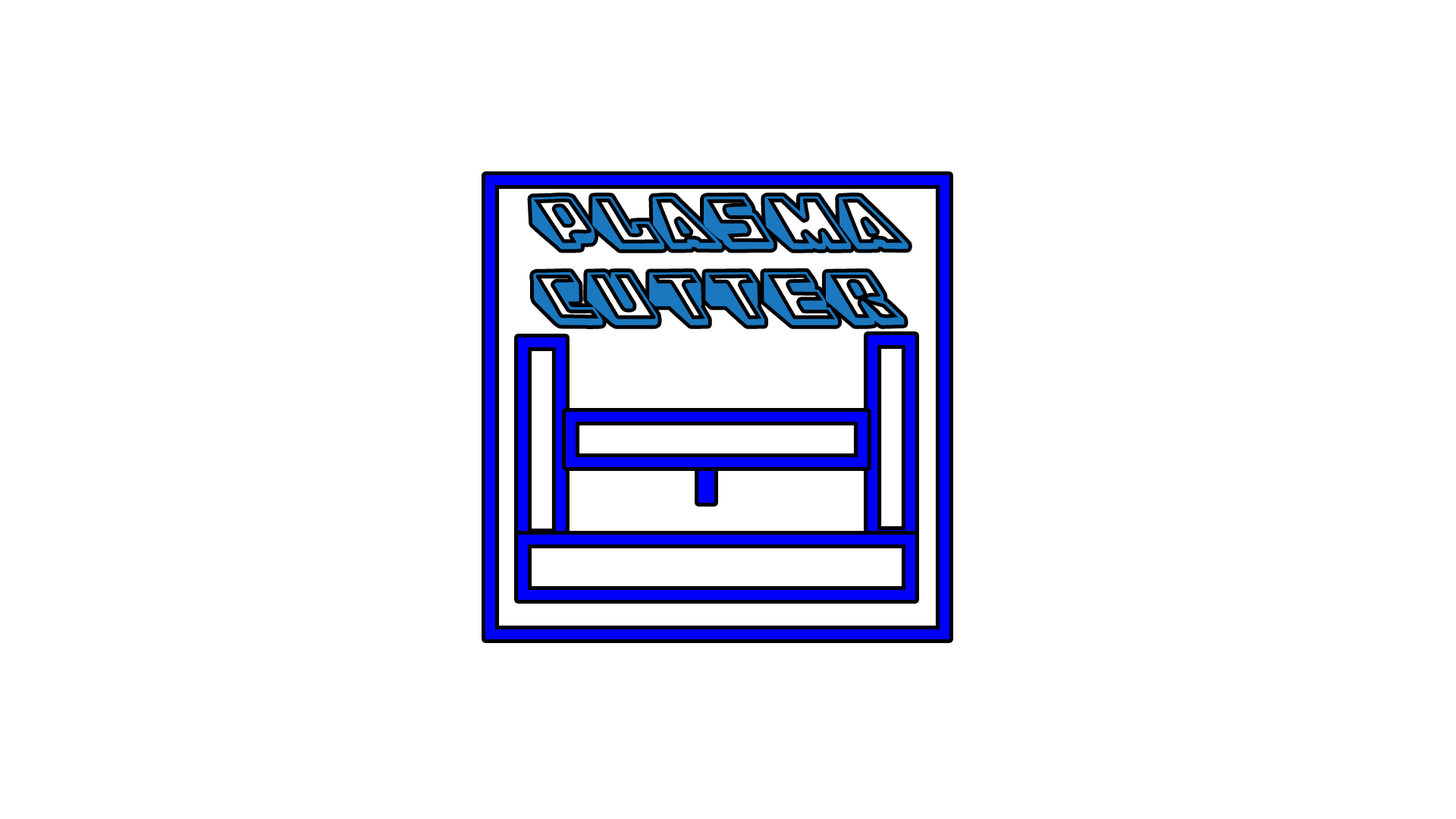
<style>
.page{position:relative;width:1456px;height:819px;background:#ffffff}
.page>*{position:absolute;margin:0}
.t1{font:61.4px/10.6px "Wedgie-Regular";color:#1b78bf;text-transform:uppercase;font-weight:bold}
.t2{font:61.4px/75.8px "Wedgie-Regular";color:#1b78bf;text-transform:uppercase;font-weight:bold}
</style>
<div class="page">
<p class="t1" style="left:531px;top:196px;width:377px;height:129px;text-align:center">Plasma<span class="t2"><br>cutter</span></p>
</div>
